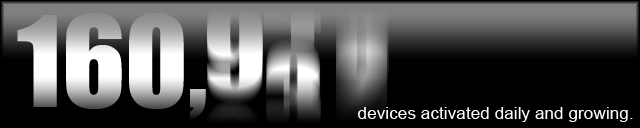
<style>
.page{position:relative;width:640px;height:128px;background:#000000}
.page>*{position:absolute;margin:0}
.t1{font:117px "Impact"}
.t2{font:17.3px "ArialMT";color:#ffffff}
</style>
<div class="page">
<p class="t1" style="left:17px;top:13px;width:189px;height:106px">160,</p>
<p class="t2" style="left:358px;top:107px;width:275px;height:15px">devices activated daily and growing.</p>
</div>
